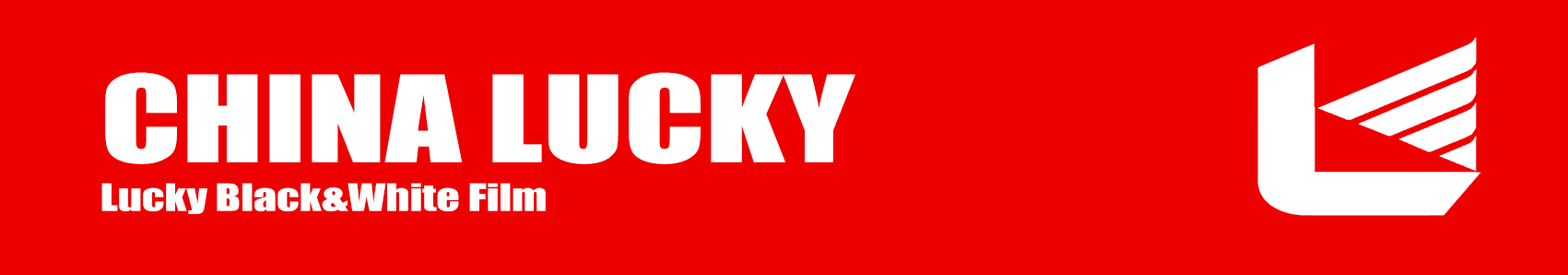
<style>
.page{position:relative;width:1568px;height:275px;background:#ed0000}
.page>*{position:absolute;margin:0}
.t1{font:110.6px "Impact";color:#ffffff;scale:1.33 1}
.t2{font:34.6px "Impact";color:#ffffff;scale:1.33 1}
</style>
<div class="page">
<p class="t1" style="left:105px;top:72px;width:750px;height:92px">CHINA LUCKY</p>
<p class="t2" style="left:101px;top:183px;width:445px;height:31px">Lucky Black&amp;White Film</p>
</div>
